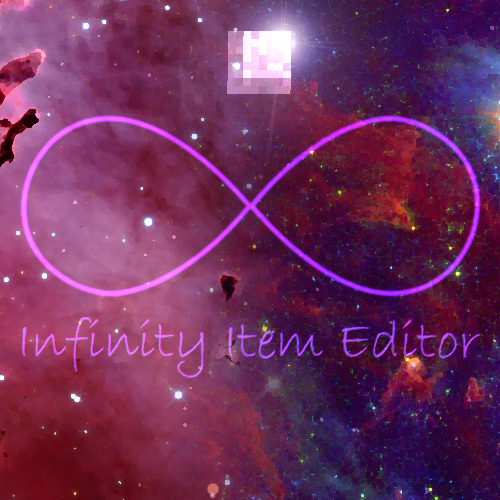
<style>
.page{position:relative;width:500px;height:500px}
.page>*{position:absolute;margin:0}
.t1{font:55px "BradleyHandITC"}
</style>
<div class="page">
<p class="t1" style="left:21px;top:318px;width:460px;height:61px">Infinity Item Editor</p>
<p class="t1" style="left:22px;top:317px;width:460px;height:61px">Infinity Item Editor</p>
</div>
